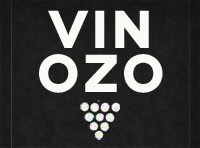
<style>
.page{position:relative;width:200px;height:148px}
.page>*{position:absolute;margin:0}
.t1{font:53.3px/44.4px "Novecentowide-Bold";letter-spacing:0.05em;color:#fbfaf6}
</style>
<div class="page">
<p class="t1" style="left:39px;top:10px;width:124px;height:83px;text-align:center">VIN<br>OZO</p>
</div>
